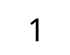
<style>
.page{position:relative;width:70px;height:55px;background:#ffffff}
.page>*{position:absolute;margin:0}
.t1{font:31.8px "DroidSans";color:#000000}
</style>
<div class="page">
<p class="t1" style="left:30px;top:18px;width:9px;height:24px">1</p>
</div>
